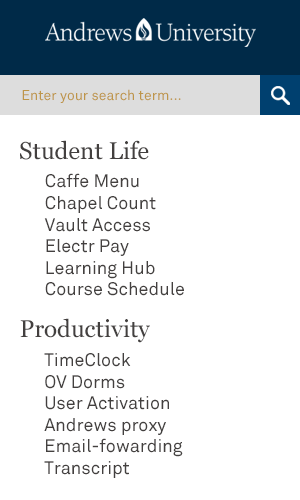
<style>
.page{position:relative;width:300px;height:500px;background:#ffffff}
.page>*{position:absolute;margin:0}
.t1{font:14px "AUAkkurat";color:#be9549}
.t2{font:24px "Georgia";color:#43403f}
.t3{font:18px "AUAkkurat";color:#43403f}
</style>
<div class="page">
<p class="t1" style="left:22px;top:89px;width:159px;height:14px">Enter your search term...</p>
<p class="t2" style="left:20px;top:140px;width:129px;height:20px">Student Life</p>
<p class="t3" style="left:44px;top:173px;width:140px;height:123px">Caffe Menu<br>Chapel Count<br>Vault Access<br>Electr Pay<br>Learning Hub<br>Course Schedule</p>
<p class="t2" style="left:20px;top:318px;width:130px;height:25px">Productivity</p>
<p class="t3" style="left:44px;top:353px;width:139px;height:125px">TimeClock<br>OV Dorms<br>User Activation<br>Andrews proxy<br>Email-fowarding<br>Transcript</p>
</div>
